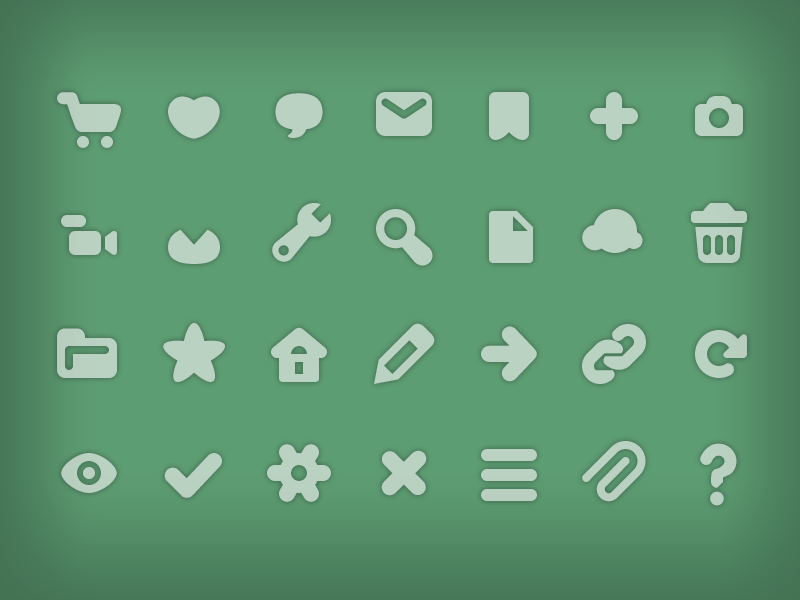
<style>
.page{position:relative;width:800px;height:600px;background:#5d9d73}
.page>*{position:absolute;margin:0}
.t1{font:64px/119px "chubbies-Regular";letter-spacing:0.64em;color:#bad2c1}
</style>
<div class="page">
<p class="t1" style="left:57px;top:92px;width:690px;height:414px;text-align:center">abcdefg<br>hijklmn<br>opqrstu<br>AvwxyzB</p>
</div>
